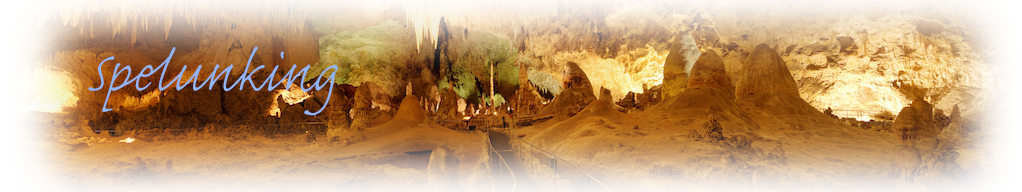
<style>
.page{position:relative;width:1022px;height:192px}
.page>*{position:absolute;margin:0}
.t1{font:72px "CaflischScriptPro-Light";color:#93b4f5}
</style>
<div class="page">
<p class="t1" style="left:88px;top:46px;width:250px;height:70px">Spelunking</p>
</div>
